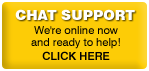
<style>
.page{position:relative;width:149px;height:71px;background:#fdcc06}
.page>*{position:absolute;margin:0}
.t1{font:14px "Swiss721BT-Black";color:#ffffff}
.t2{font:11px/12px "Swiss721BT-Roman";color:#000000}
.t3{font:11px/14px "Swiss721BT-Bold";color:#000000}
</style>
<div class="page">
<p class="t1" style="left:15px;top:9px;width:120px;height:11px">CHAT SUPPORT</p>
<p class="t2" style="left:31px;top:26px;width:89px;height:34px;text-align:center">We're online now <br>and ready to help!<br><span class="t3">CLICK HERE</span></p>
</div>
